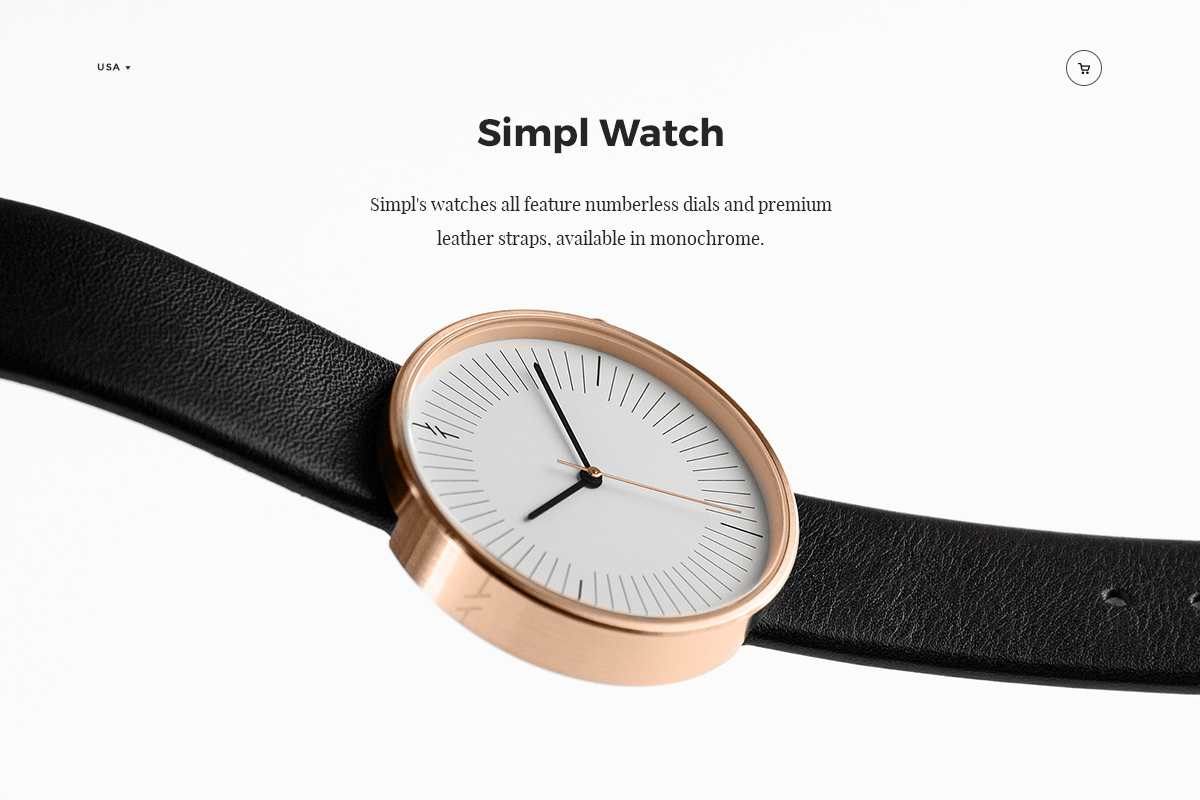
<style>
.page{position:relative;width:1200px;height:800px;background:#fbfbfb}
.page>*{position:absolute;margin:0}
.t1{font:10px "Montserrat-Bold";letter-spacing:0.08em;color:#242526}
.t2{font:38px "Montserrat-Bold";color:#242526}
.t3{font:18px/34.1px "PlayfairDisplay-Regular";color:#242526}
</style>
<div class="page">
<p class="t1" style="left:97px;top:63px;width:23px;height:8px">USA</p>
<p class="t2" style="left:477px;top:116px;width:246px;height:38px">Simpl Watch</p>
<p class="t3" style="left:371px;top:196px;width:461px;height:52px;text-align:center">Simpl's watches all feature numberless dials and premium leather straps, available in monochrome.</p>
</div>
